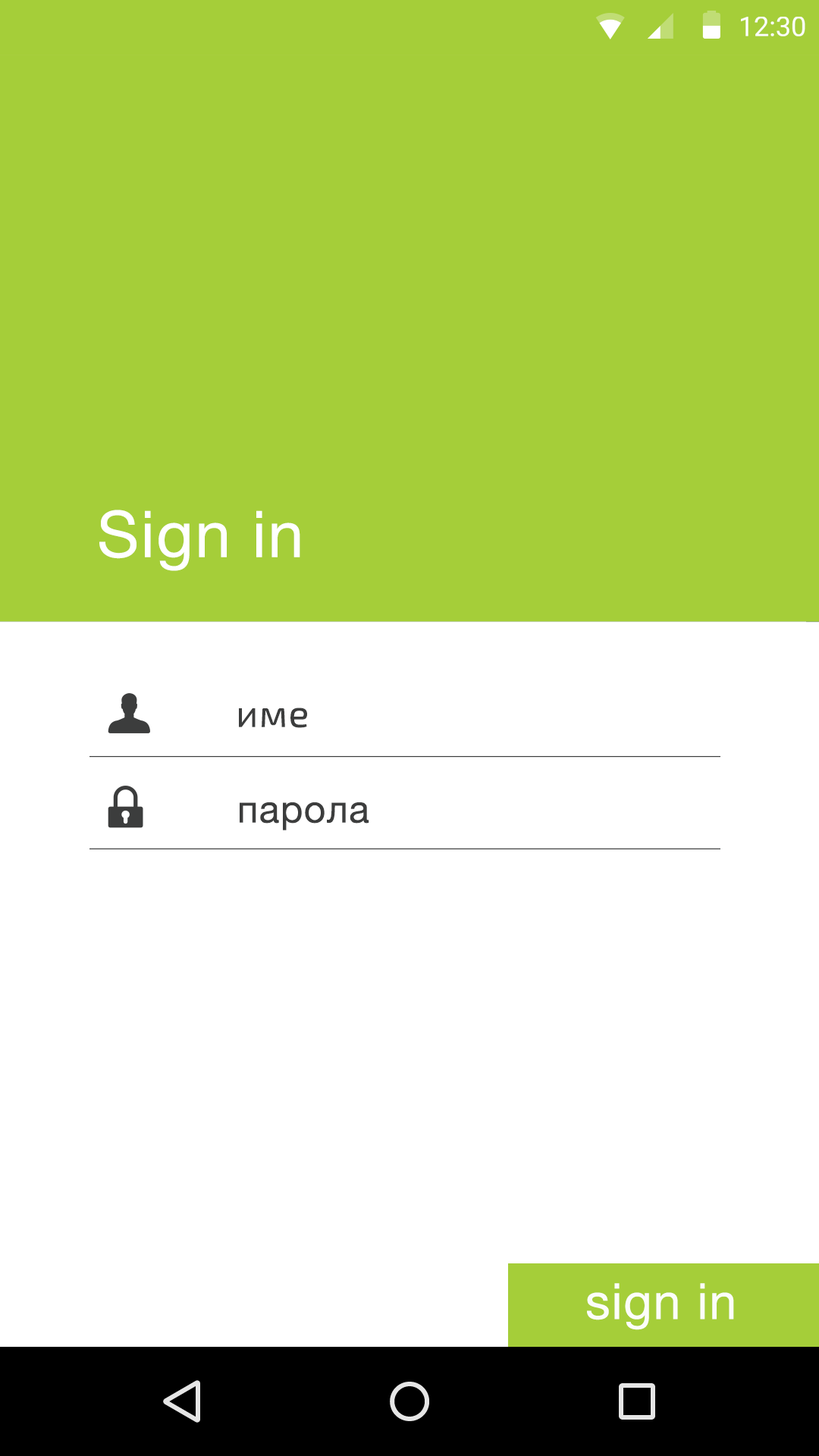
<style>
.page{position:relative;width:819px;height:1456px;background:#ffffff}
.page>*{position:absolute;margin:0}
.t1{font:27.3px "Roboto-Regular";color:#ffffff}
.t2{font:64.5px "HelveticaNeue";letter-spacing:0.025em;color:#ffffff}
.t3{font:38.2px "Exo2-Regular";letter-spacing:0.025em;color:#3c3d3d}
.t4{font:38.2px "HelveticaNeue";letter-spacing:0.025em;color:#3c3d3d}
.t5{font:49.9px "HelveticaNeue";letter-spacing:0.025em;color:#ffffff}
</style>
<div class="page">
<p class="t1" style="left:741px;top:17px;width:64px;height:19px">12:30</p>
<p class="t2" style="left:99px;top:510px;width:201px;height:61px">Sign in</p>
<p class="t3" style="left:239px;top:708px;width:68px;height:20px">име</p>
<p class="t4" style="left:240px;top:802px;width:129px;height:28px">парола</p>
<p class="t5" style="left:587px;top:1283px;width:147px;height:47px;opacity:0.96">sign in</p>
</div>
